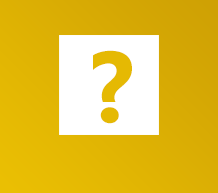
<style>
.page{position:relative;width:218px;height:193px}
.page>*{position:absolute;margin:0}
.t1{font:100px "SegoeUI-Bold";color:#e5b903}
</style>
<div class="page">
<p class="t1" style="left:93px;top:50px;width:39px;height:74px">?</p>
</div>
